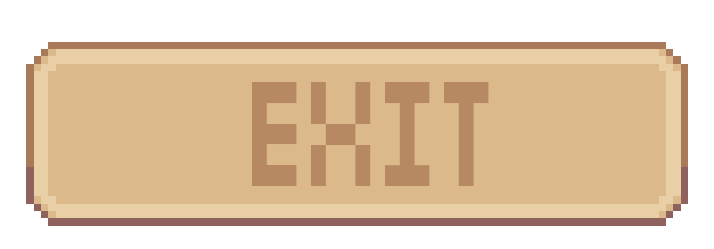
<style>
.page{position:relative;width:714px;height:249px;background:#dcb98a}
.page>*{position:absolute;margin:0}
.t1{font:166.3px "04b03";color:#b68962;scale:0.71 1}
</style>
<div class="page">
<p class="t1" style="left:252px;top:82px;width:237px;height:104px">EXIT</p>
</div>
